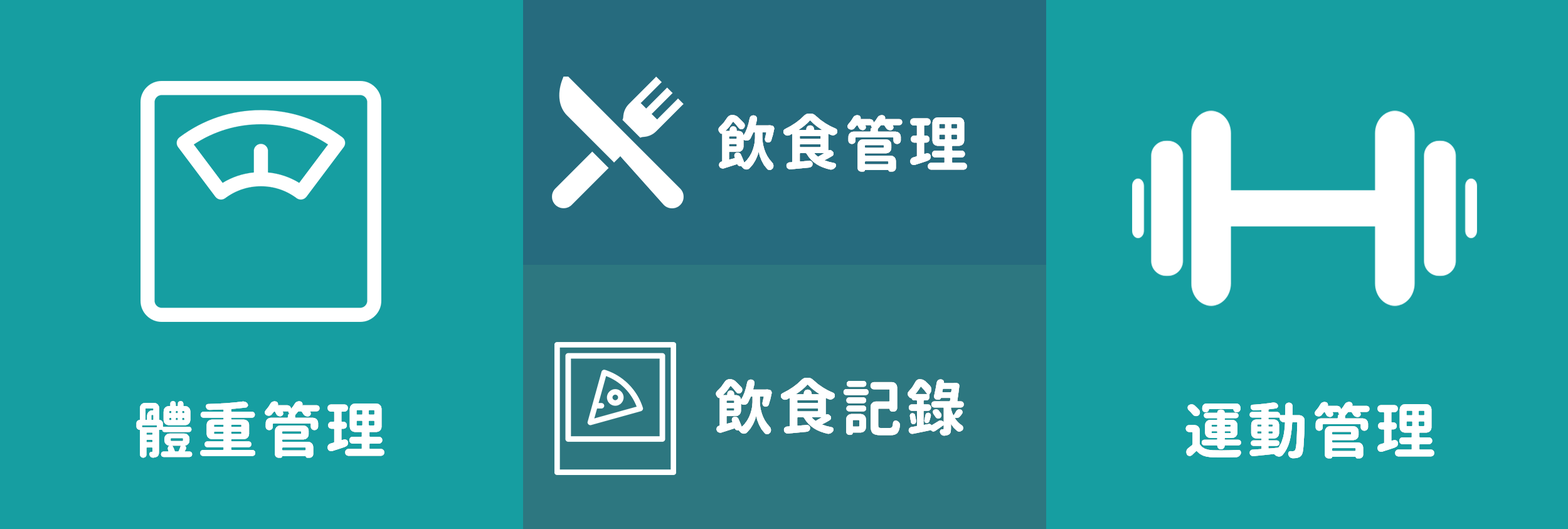
<style>
.page{position:relative;width:1568px;height:529px;background:#169ea1}
.page>*{position:absolute;margin:0}
.t1{font:60.2px "GenJyuuGothicX-Bold";letter-spacing:0.065em;color:#ffffff}
</style>
<div class="page">
<p class="t1" style="left:718px;top:114px;width:249px;height:58px">飲食管理</p>
<p class="t1" style="left:716px;top:378px;width:248px;height:58px">飲食記錄</p>
<p class="t1" style="left:136px;top:401px;width:248px;height:57px">體重管理</p>
<p class="t1" style="left:1185px;top:401px;width:249px;height:57px">運動管理</p>
</div>
